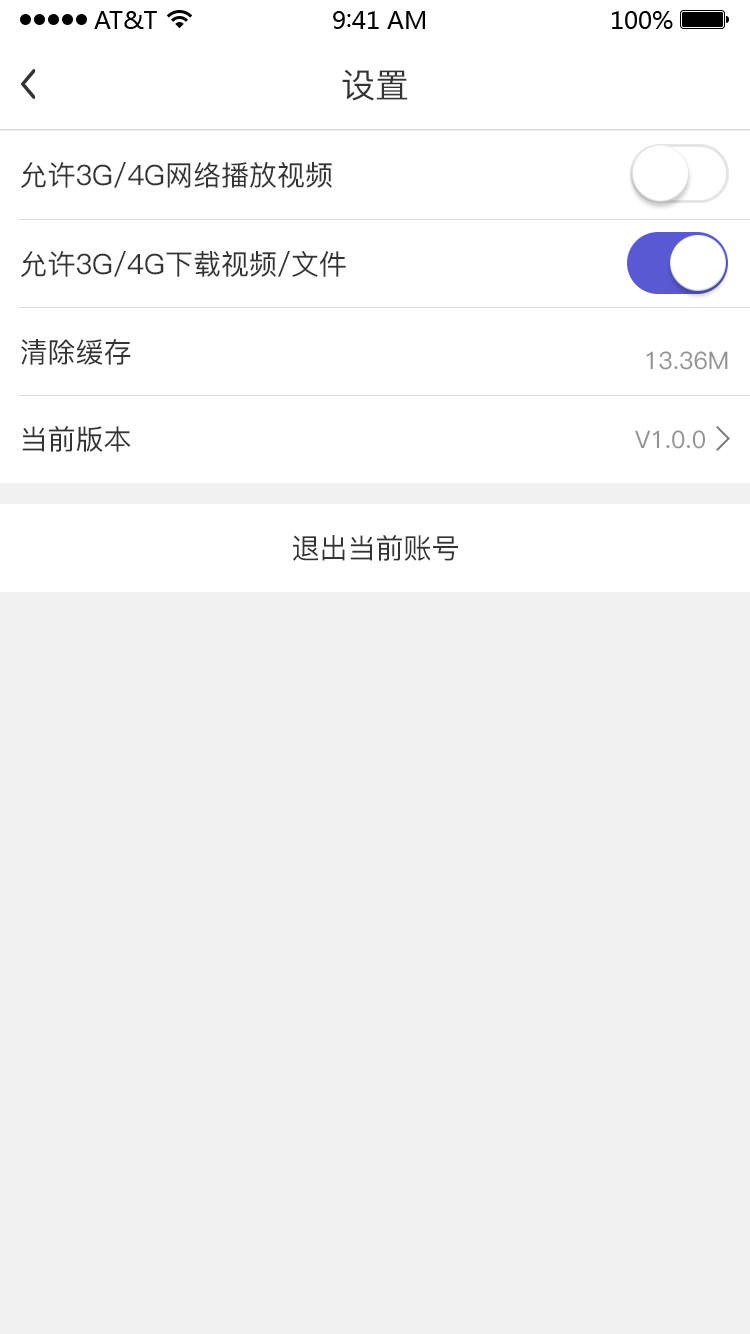
<style>
.page{position:relative;width:750px;height:1334px;background:#f1f1f1}
.page>*{position:absolute;margin:0}
.t1{font:34px "PingFang-SC-Medium";color:#333333}
.t2{font:28px "PingFang-SC-Medium";color:#333333}
.t3{font:24px "PingFang-SC-Medium";color:#929292}
</style>
<div class="page">
<p class="t1" style="left:342px;top:69px;width:66px;height:32px">设置</p>
<p class="t2" style="left:21px;top:161px;width:311px;height:27px">允许3G/ 4G网络播放视频</p>
<p class="t2" style="left:21px;top:251px;width:325px;height:26px">允许3G/4G下载视频/文件</p>
<p class="t2" style="left:21px;top:339px;width:110px;height:26px">清除缓存</p>
<p class="t3" style="left:646px;top:351px;width:82px;height:19px">13.36M</p>
<p class="t2" style="left:22px;top:426px;width:109px;height:26px">当前版本</p>
<p class="t3" style="left:635px;top:430px;width:71px;height:19px">V1.0.0</p>
<p class="t2" style="left:293px;top:535px;width:165px;height:26px">退出当前账号</p>
</div>
